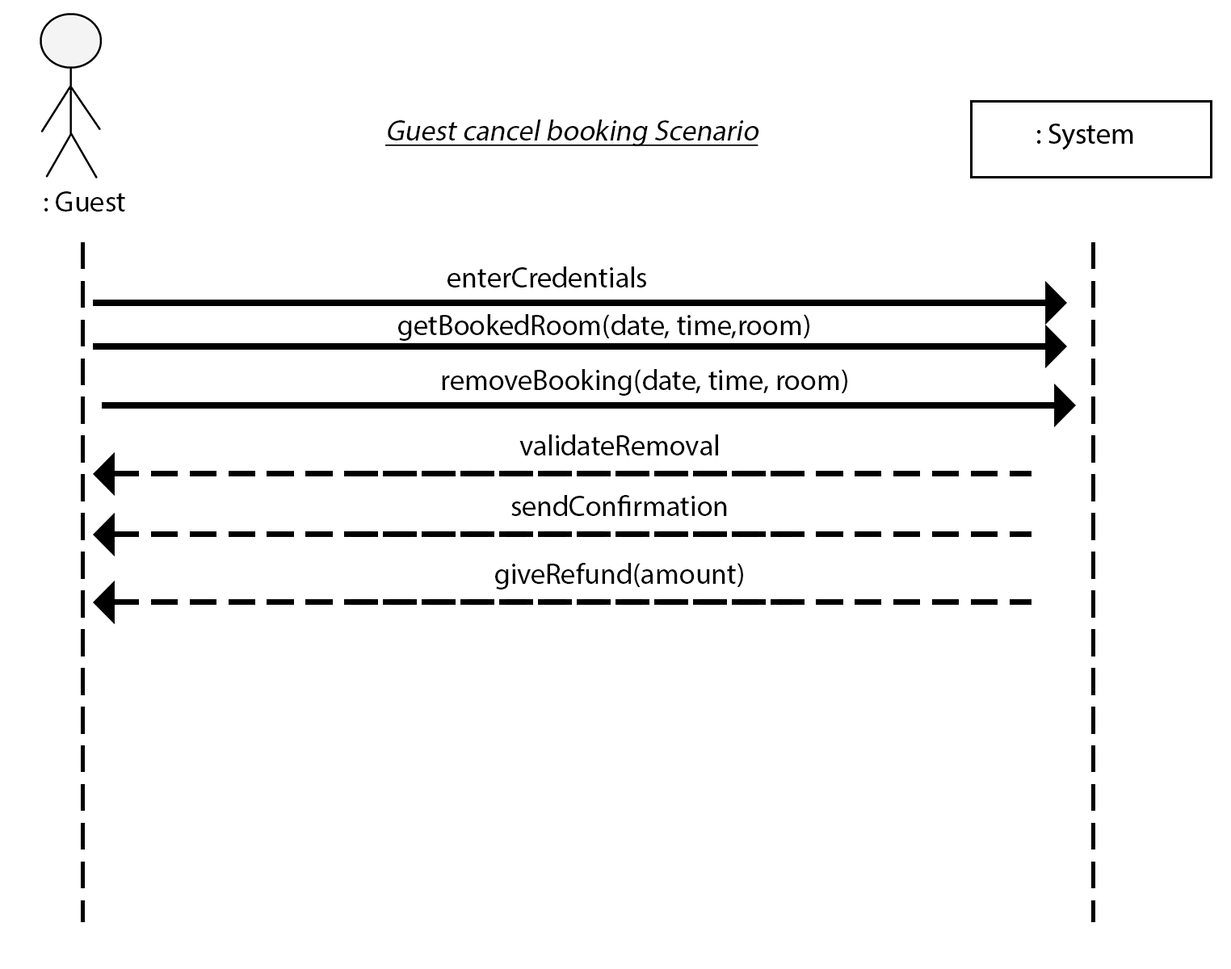
<style>
.page{position:relative;width:1231px;height:969px;background:#ffffff}
.page>*{position:absolute;margin:0}
.t1{font:29.1px "MyriadPro-Regular";color:#000000;font-style:italic;text-decoration:underline}
.t2{font:29.1px "MyriadPro-Regular";color:#000000}
</style>
<div class="page">
<p class="t1" style="left:384px;top:120px;width:375px;height:26px">Guest cancel booking Scenario</p>
<p class="t2" style="left:44px;top:191px;width:81px;height:21px">: Guest</p>
<p class="t2" style="left:447px;top:266px;width:199px;height:21px">enterCredentials</p>
<p class="t2" style="left:398px;top:314px;width:411px;height:27px">getBookedRoom(date, time,room)</p>
<p class="t2" style="left:442px;top:369px;width:405px;height:27px">removeBooking(date, time, room)</p>
<p class="t2" style="left:519px;top:434px;width:199px;height:21px">validateRemoval</p>
<p class="t2" style="left:511px;top:495px;width:216px;height:21px">sendConfirmation</p>
<p class="t2" style="left:495px;top:563px;width:248px;height:26px">giveRefund(amount)</p>
</div>
